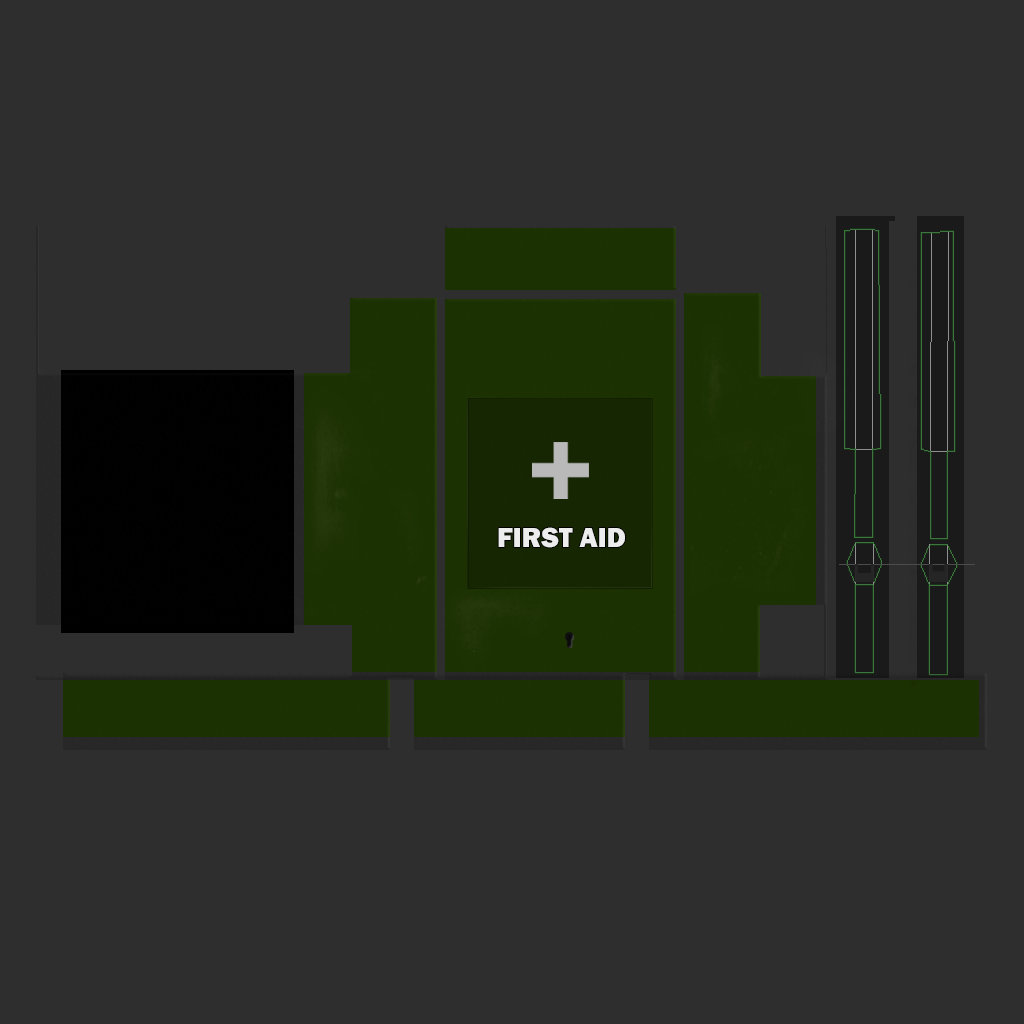
<style>
.page{position:relative;width:1024px;height:1024px;background:#2e2e2e}
.page>*{position:absolute;margin:0}
.t1{font:28.5px "FranklinGothic-Heavy";color:#ededed}
</style>
<div class="page">
<p class="t1" style="left:498px;top:527px;width:127px;height:21px">FIRST AID</p>
</div>
